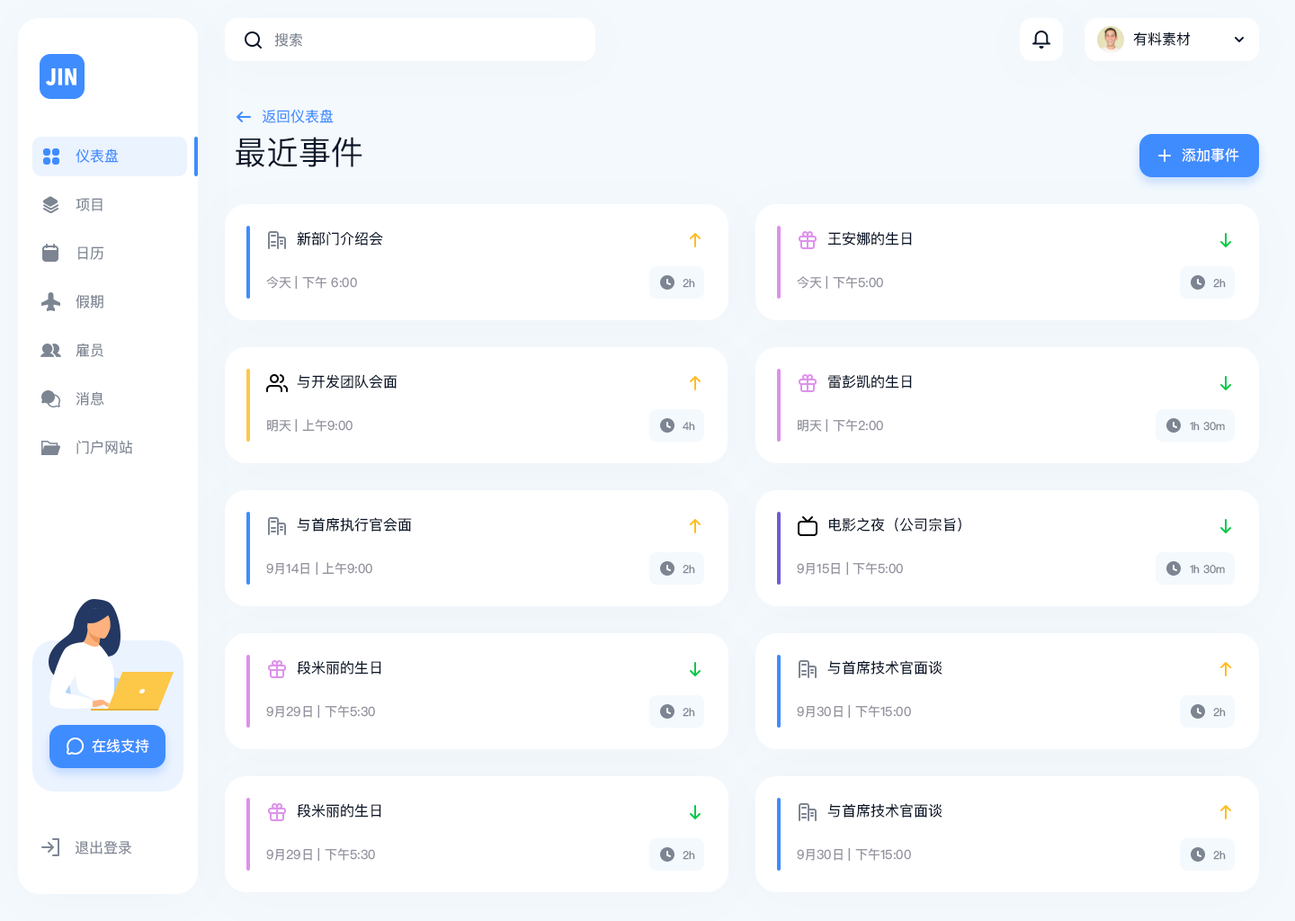
<style>
.page{position:relative;width:1295px;height:921px;background:#ffffff}
.page>*{position:absolute;margin:0}
.t1{font:14.4px "PingFangSC-Regular";color:#7d8592}
.t2{font:14.4px "PingFangSC-Regular";color:#0a1629}
.t3{font:14.4px "PingFangSC-Regular";color:#3f8cff}
.t4{font:32.4px "PingFangSC-Regular";color:#0a1629}
.t5{font:14.4px "PingFangSC-Regular";color:#ffffff}
.t6{font:12.6px "PingFangSC-Regular";color:#91929e}
.t7{font:10.8px "PingFangSC-Regular";color:#7d8592}
</style>
<div class="page">
<p class="t1" style="left:274px;top:32px;width:28px;height:15px">搜索</p>
<p class="t2" style="left:1133px;top:31px;width:58px;height:15px">有料素材</p>
<p class="t3" style="left:262px;top:109px;width:72px;height:14px">返回仪表盘</p>
<p class="t4" style="left:236px;top:137px;width:126px;height:30px">最近事件</p>
<p class="t3" style="left:76px;top:148px;width:43px;height:15px">仪表盘</p>
<p class="t5" style="left:1182px;top:147px;width:57px;height:15px">添加事件</p>
<p class="t1" style="left:76px;top:198px;width:27px;height:13px">项目</p>
<p class="t2" style="left:297px;top:231px;width:86px;height:14px">新部门介绍会</p>
<p class="t2" style="left:827px;top:231px;width:85px;height:14px">王安娜的生日</p>
<p class="t1" style="left:78px;top:246px;width:25px;height:14px">日历</p>
<p class="t6" style="left:266px;top:275px;width:91px;height:15px">今天 | 下午 6:00</p>
<p class="t7" style="left:683px;top:279px;width:12px;height:9px">2h</p>
<p class="t6" style="left:797px;top:275px;width:86px;height:15px">今天 | 下午5:00</p>
<p class="t7" style="left:1213px;top:279px;width:13px;height:9px">2h</p>
<p class="t1" style="left:76px;top:294px;width:27px;height:14px">假期</p>
<p class="t1" style="left:76px;top:343px;width:27px;height:14px">雇员</p>
<p class="t2" style="left:297px;top:374px;width:100px;height:14px">与开发团队会面</p>
<p class="t2" style="left:828px;top:374px;width:84px;height:14px">雷彭凯的生日</p>
<p class="t1" style="left:76px;top:391px;width:28px;height:15px">消息</p>
<p class="t6" style="left:267px;top:418px;width:86px;height:15px">明天 | 上午9:00</p>
<p class="t7" style="left:683px;top:422px;width:12px;height:9px">4h</p>
<p class="t6" style="left:798px;top:418px;width:85px;height:15px">明天 | 下午2:00</p>
<p class="t7" style="left:1190px;top:422px;width:35px;height:9px">1h 30m</p>
<p class="t1" style="left:76px;top:440px;width:57px;height:14px">门户网站</p>
<p class="t2" style="left:297px;top:517px;width:115px;height:14px">与首席执行官会面</p>
<p class="t2" style="left:829px;top:517px;width:132px;height:14px">电影之夜（公司宗旨）</p>
<p class="t6" style="left:266px;top:561px;width:106px;height:15px">9月14日 | 上午9:00</p>
<p class="t7" style="left:683px;top:565px;width:12px;height:9px">2h</p>
<p class="t6" style="left:797px;top:561px;width:106px;height:15px">9月15日 | 下午5:00</p>
<p class="t7" style="left:1190px;top:565px;width:35px;height:9px">1h 30m</p>
<p class="t2" style="left:297px;top:660px;width:84px;height:14px">段米丽的生日</p>
<p class="t2" style="left:827px;top:660px;width:115px;height:14px">与首席技术官面谈</p>
<p class="t6" style="left:266px;top:704px;width:109px;height:15px">9月29日 | 下午5:30</p>
<p class="t7" style="left:683px;top:708px;width:12px;height:9px">2h</p>
<p class="t6" style="left:797px;top:704px;width:114px;height:15px">9月30日 | 下午15:00</p>
<p class="t7" style="left:1213px;top:708px;width:13px;height:9px">2h</p>
<p class="t5" style="left:92px;top:738px;width:57px;height:15px">在线支持</p>
<p class="t2" style="left:297px;top:803px;width:84px;height:14px">段米丽的生日</p>
<p class="t2" style="left:827px;top:803px;width:115px;height:14px">与首席技术官面谈</p>
<p class="t1" style="left:75px;top:840px;width:56px;height:14px">退出登录</p>
<p class="t6" style="left:266px;top:847px;width:109px;height:14px">9月29日 | 下午5:30</p>
<p class="t7" style="left:683px;top:851px;width:12px;height:9px">2h</p>
<p class="t6" style="left:797px;top:847px;width:114px;height:14px">9月30日 | 下午15:00</p>
<p class="t7" style="left:1213px;top:851px;width:13px;height:9px">2h</p>
</div>
